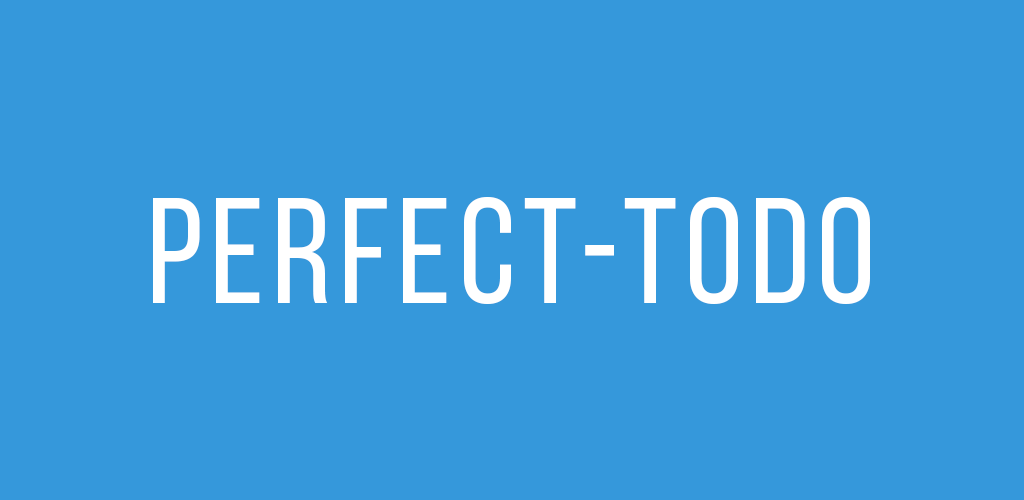
<style>
.page{position:relative;width:1024px;height:500px;background:#3598db}
.page>*{position:absolute;margin:0}
.t1{font:150px "BebasNeueRegular";letter-spacing:0.05em;color:#ffffff}
</style>
<div class="page">
<p class="t1" style="left:153px;top:197px;width:717px;height:107px">PERFECT-TODO</p>
</div>
